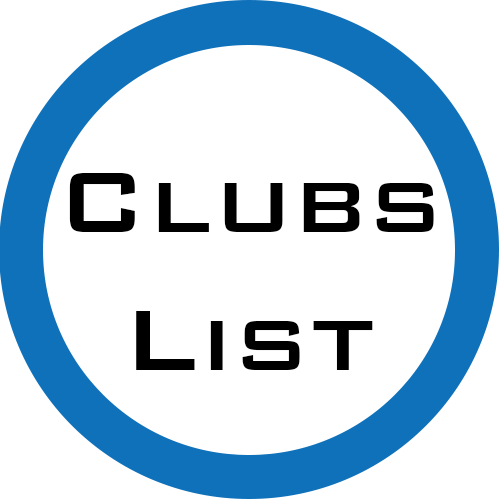
<style>
.page{position:relative;width:500px;height:500px;background:#ffffff}
.page>*{position:absolute;margin:0}
.t1{font:115px "BankGothicBT-Medium";color:#000000}
</style>
<div class="page">
<p class="t1" style="left:69px;top:173px;width:365px;height:197px;text-align:center">Clubs<br>List</p>
</div>
